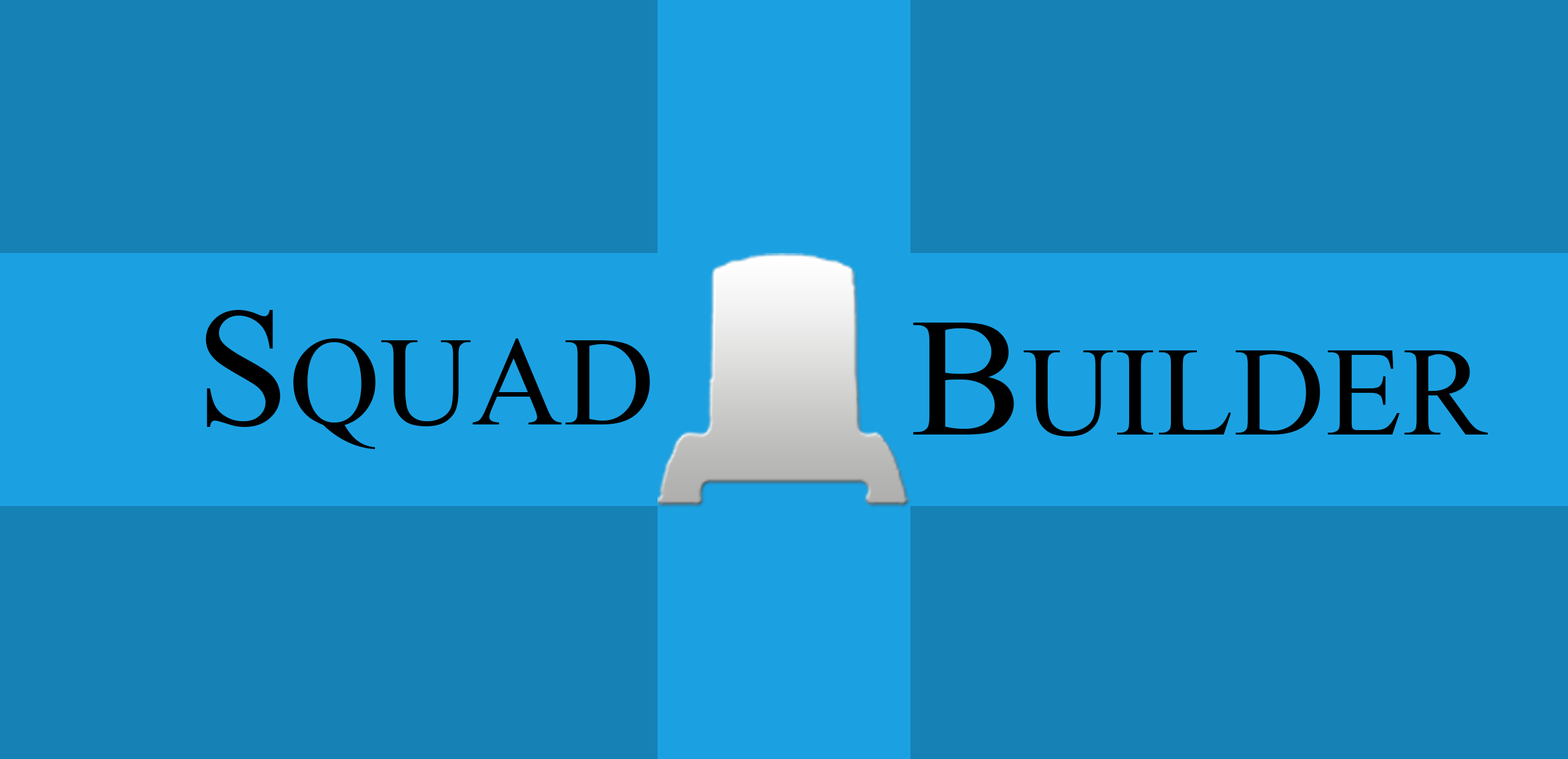
<style>
.page{position:relative;width:1568px;height:759px;background:#1681b5}
.page>*{position:absolute;margin:0}
.t1{font:126.5px "TimesNewRomanPSMT";color:#000000}
.t2{font:168.6px "TimesNewRomanPSMT";color:#000000}
</style>
<div class="page">
<p class="t1" style="left:205px;top:310px;width:445px;height:139px"><span class="t2">S</span>QUAD</p>
<p class="t1" style="left:913px;top:322px;width:575px;height:114px"><span class="t2">B</span>UILDER</p>
</div>
